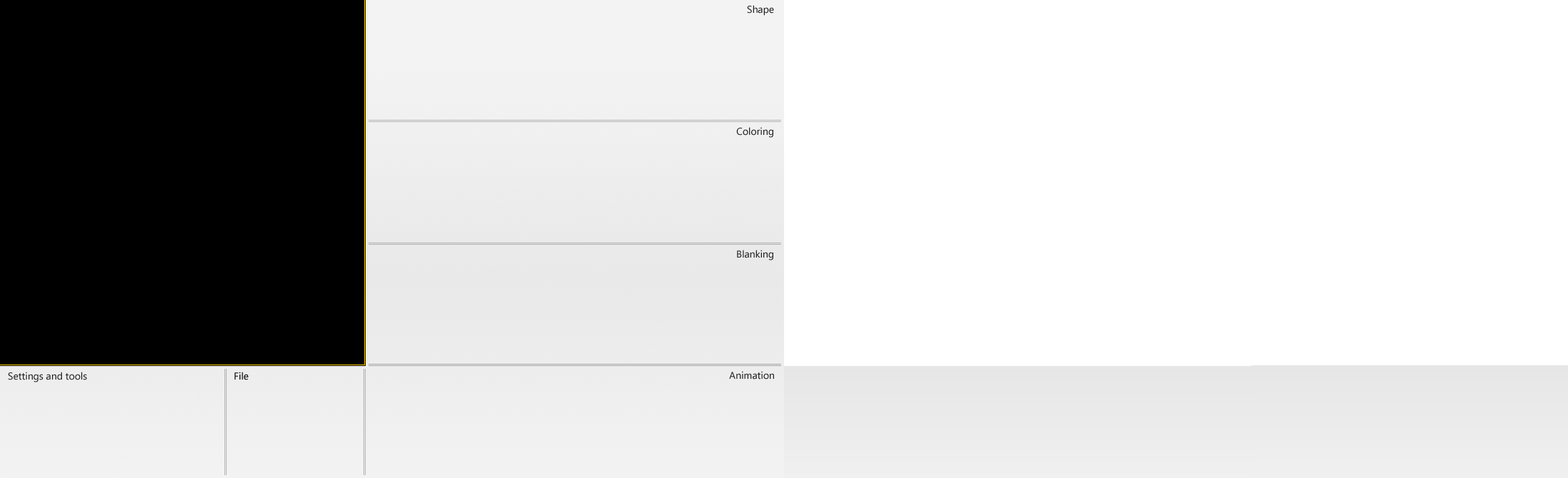
<style>
.page{position:relative;width:1568px;height:478px;background:#ffffff}
.page>*{position:absolute;margin:0}
.t1{font:10px "SegoeUI";color:#212121}
.t2{font:10px "SegoeUI";color:#000000}
</style>
<div class="page">
<p class="t1" style="left:747px;top:5px;width:27px;height:11px">Shape</p>
<p class="t1" style="left:736px;top:127px;width:37px;height:11px">Coloring</p>
<p class="t1" style="left:737px;top:249px;width:36px;height:11px">Blanking</p>
<p class="t1" style="left:8px;top:371px;width:79px;height:11px">Settings and tools</p>
<p class="t2" style="left:234px;top:371px;width:15px;height:9px">File</p>
<p class="t1" style="left:729px;top:371px;width:45px;height:8px">Animation</p>
</div>
